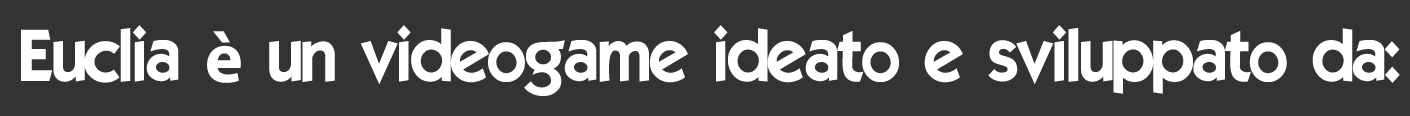
<style>
.page{position:relative;width:1410px;height:116px;background:#333333}
.page>*{position:absolute;margin:0}
.t1{font:72px "ELEGANCE";color:#ffffff}
.t2{font:72px "MyriadPro-Bold";color:#ffffff}
</style>
<div class="page">
<p class="t1" style="left:21px;top:25px;width:1379px;height:71px">Euclia <span class="t2">è</span> un videogame ideato e sviluppato da:</p>
</div>
